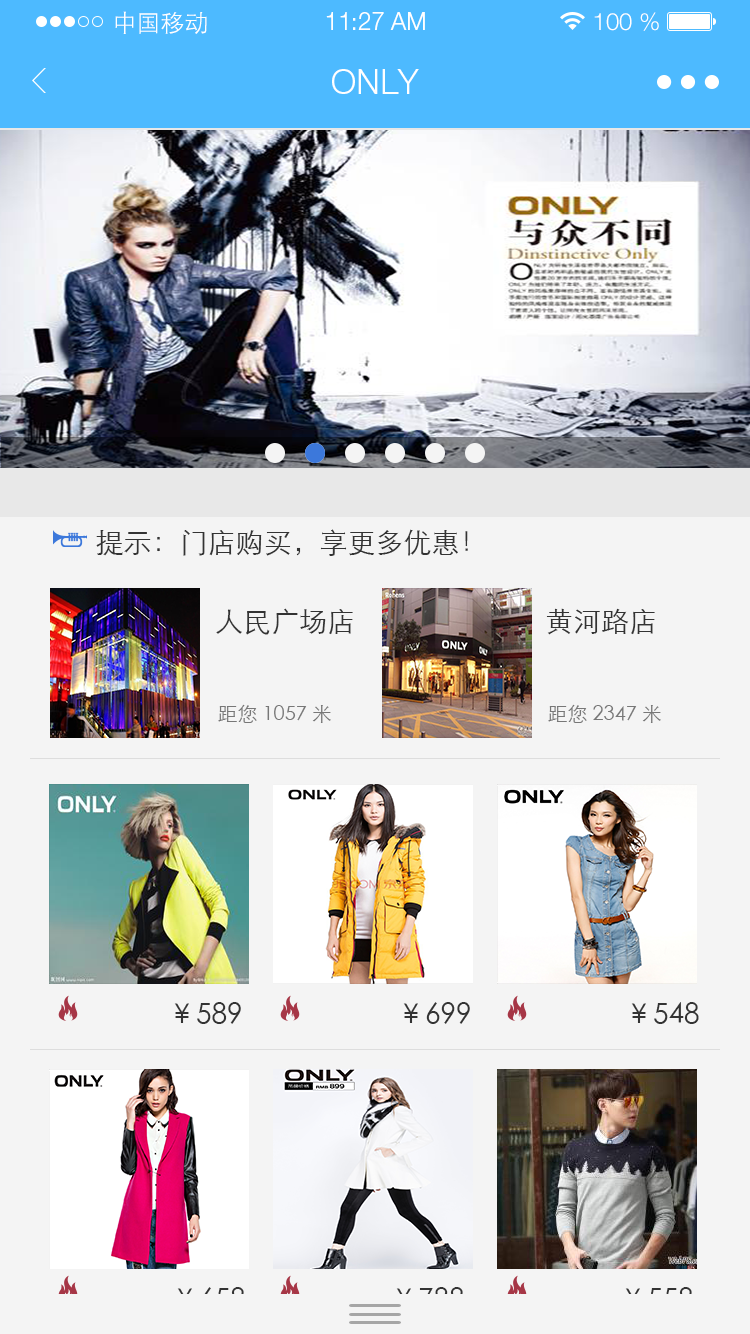
<style>
.page{position:relative;width:750px;height:1334px;background:#f4f4f4}
.page>*{position:absolute;margin:0}
.t1{font:24px "STXihei";color:#ffffff}
.t2{font:24px "HelveticaNeueLTPro-Lt";color:#ffffff}
.t3{font:34px "HelveticaNeueLTPro-Lt";color:#ffffff}
.t4{font:28px "STXihei";color:#333333}
.t5{font:20px "STXihei";color:#777777}
.t6{font:28px "STXihei";color:#f4f4f4}
</style>
<div class="page">
<p class="t1" style="left:115px;top:11px;width:92px;height:23px">中国移动</p>
<p class="t2" style="left:326px;top:12px;width:99px;height:18px">11:27 AM</p>
<p class="t2" style="left:594px;top:12px;width:65px;height:19px">100 %</p>
<p class="t3" style="left:332px;top:69px;width:87px;height:25px">ONLY</p>
<p class="t4" style="left:96px;top:529px;width:372px;height:27px">提示：门店购买，享更多优惠！</p>
<p class="t4" style="left:216px;top:608px;width:137px;height:27px">人民广场店</p>
<p class="t4" style="left:546px;top:608px;width:109px;height:27px">黄河路店</p>
<p class="t5" style="left:218px;top:704px;width:113px;height:19px">距您1057米</p>
<p class="t5" style="left:548px;top:704px;width:113px;height:19px">距您2347米</p>
<p class="t4" style="left:174px;top:1002px;width:67px;height:22px">￥589</p>
<p class="t4" style="left:403px;top:1002px;width:67px;height:22px">￥699</p>
<p class="t4" style="left:631px;top:1002px;width:68px;height:22px">￥548</p>
<p class="t6" style="left:177px;top:1287px;width:68px;height:22px">￥658</p>
<p class="t6" style="left:396px;top:1287px;width:68px;height:22px">￥788</p>
<p class="t6" style="left:625px;top:1287px;width:68px;height:22px">￥558</p>
</div>
